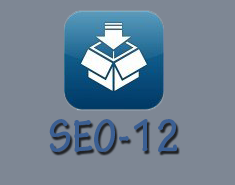
<style>
.page{position:relative;width:235px;height:185px;background:#7e8794}
.page>*{position:absolute;margin:0}
.t1{font:48px "TektonPro-BoldCond";color:#3b5f93}
</style>
<div class="page">
<p class="t1" style="left:49px;top:119px;width:128px;height:33px">SEO-12</p>
</div>
